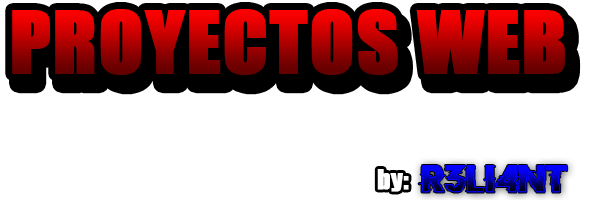
<style>
.page{position:relative;width:591px;height:200px;background:#ffffff}
.page>*{position:absolute;margin:0}
.t1{font:80px "Impact";letter-spacing:0.01em;font-weight:bold}
.t2{font:25px "Impact";letter-spacing:0.01em;color:#ffffff;font-weight:bold}
.t3{font:30px "DoctorGlitch";letter-spacing:0.01em;font-weight:bold}
</style>
<div class="page">
<p class="t1" style="left:12px;top:9px;width:553px;height:66px">PROYECTOS WEB</p>
<p class="t2" style="left:377px;top:169px;width:32px;height:23px">by:</p>
<p class="t3" style="left:418px;top:165px;width:150px;height:28px">R3LI4NT</p>
</div>
